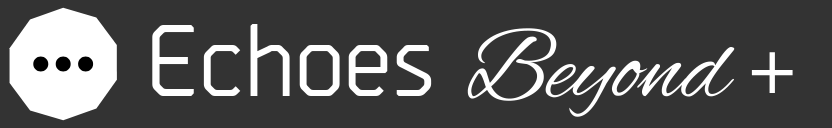
<style>
.page{position:relative;width:832px;height:128px;background:#333333}
.page>*{position:absolute;margin:0}
.t1{font:101.3px "Borda-Regular12";color:#ffffff}
.t2{font:101.3px "AlexBrush-Regular";color:#ffffff}
.t3{font:65px "DejaVuSans";color:#ffffff}
</style>
<div class="page">
<p class="t1" style="left:152px;top:24px;width:583px;height:93px">Echoes <span class="t2">Beyond</span></p>
<p class="t3" style="left:751px;top:52px;width:42px;height:41px">+</p>
</div>
